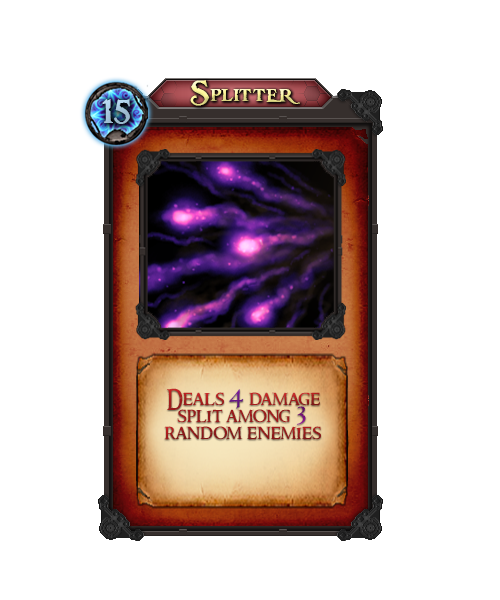
<style>
.page{position:relative;width:500px;height:600px;background:#ffffff}
.page>*{position:absolute;margin:0}
.t1{font:36px "PiecesofEight"}
.t2{font:36px "PiecesofEight";color:#b4d7ef}
.t3{font:20px/17px "RingbearerMedium"}
.t4{font:30px/17px "RingbearerMedium"}
</style>
<div class="page">
<p class="t1" style="left:190px;top:80px;width:110px;height:26px">Splitter</p>
<p class="t2" style="left:102px;top:99px;width:28px;height:25px">15</p>
<p class="t3" style="left:164px;top:388px;width:157px;height:52px;text-align:center">Deals <span class="t4">4</span> damage split among <span class="t4">3 </span>random enemies</p>
</div>
